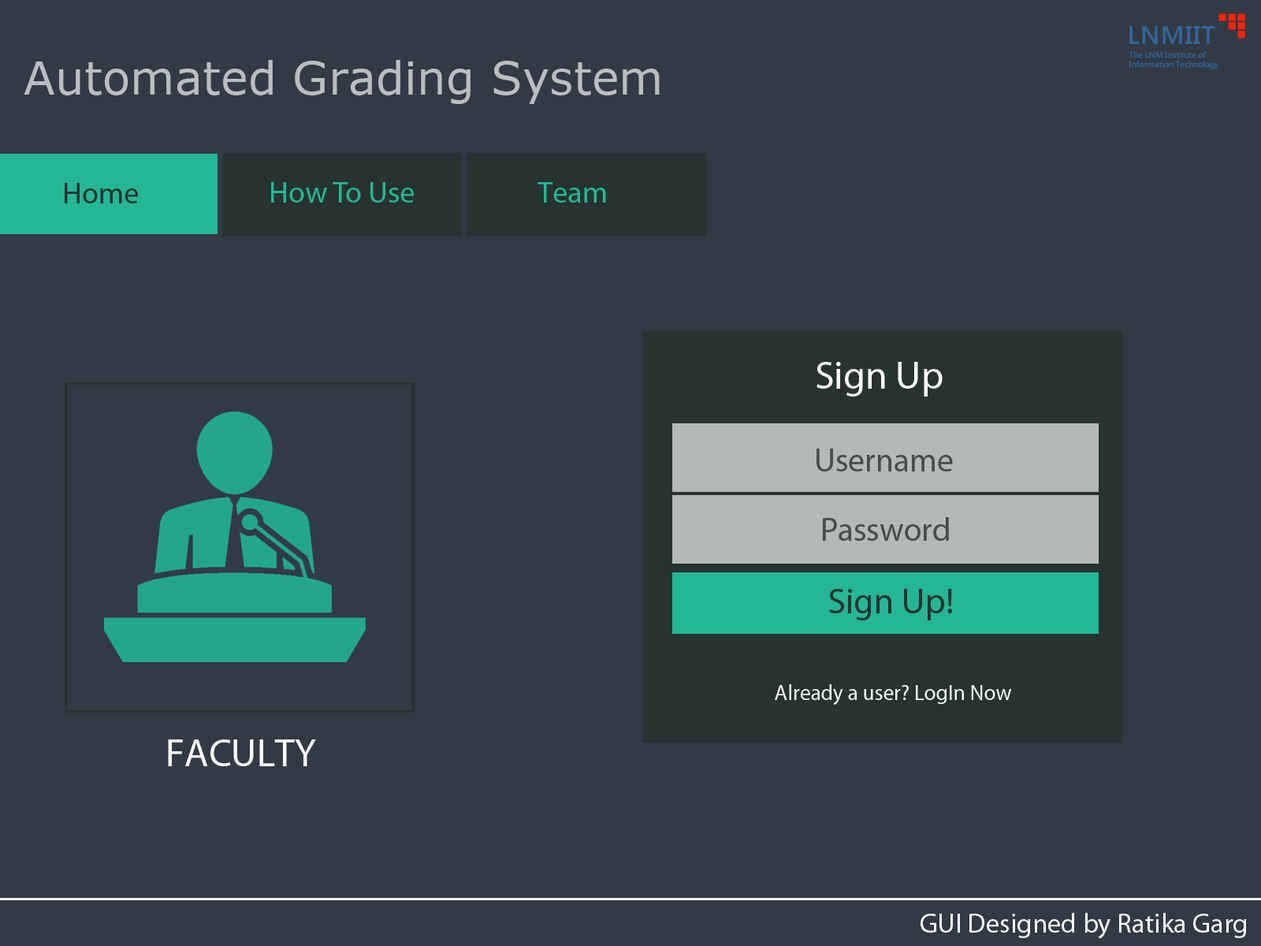
<style>
.page{position:relative;width:1261px;height:946px;background:#323a45}
.page>*{position:absolute;margin:0}
.t1{font:46px "Verdana";color:#babec1}
.t2{font:30.2px "MyriadPro-Regular";color:#273331}
.t3{font:30.2px "MyriadPro-Regular";color:#25b695}
.t4{font:39.4px "MyriadPro-Regular";color:#fcfcfc}
.t5{font:32.8px "MyriadPro-Regular";color:#494a4a}
.t6{font:36.1px "MyriadPro-Regular";color:#273331}
.t7{font:21.5px "MyriadPro-Regular";color:#f5faf9}
.t8{font:39.4px "MyriadPro-Regular";color:#fafcfc}
.t9{font:27.5px "MyriadPro-Regular";color:#f8fbfb}
</style>
<div class="page">
<p class="t1" style="left:24px;top:60px;width:636px;height:44px">Automated Grading System</p>
<p class="t2" style="left:65px;top:183px;width:73px;height:20px">Home</p>
<p class="t3" style="left:271px;top:182px;width:143px;height:21px">How To Use</p>
<p class="t3" style="left:537px;top:182px;width:69px;height:21px">Team</p>
<p class="t4" style="left:816px;top:362px;width:127px;height:34px">Sign Up</p>
<p class="t5" style="left:816px;top:448px;width:137px;height:23px">Username</p>
<p class="t5" style="left:823px;top:517px;width:126px;height:24px">Password</p>
<p class="t6" style="left:829px;top:589px;width:123px;height:31px">Sign Up!</p>
<p class="t7" style="left:775px;top:684px;width:237px;height:21px">Already a user? LogIn Now</p>
<p class="t8" style="left:168px;top:739px;width:148px;height:27px">FACULTY</p>
<p class="t9" style="left:920px;top:913px;width:326px;height:26px">GUI Designed by Ratika Garg</p>
</div>
